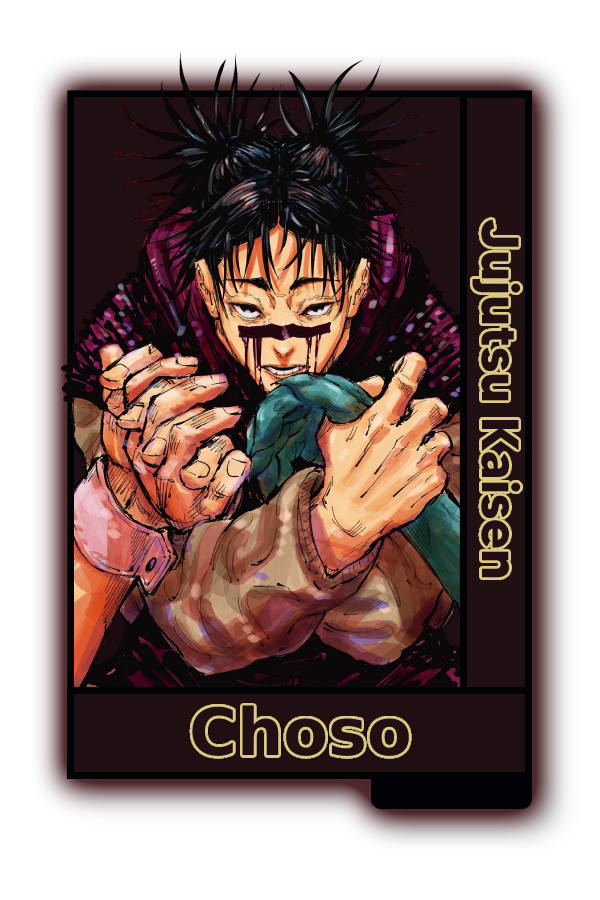
<style>
.page{position:relative;width:600px;height:900px;background:#ffffff}
.page>*{position:absolute;margin:0}
.t1{font:52px "MADETOMMY-Bold";color:#1e1214}
.t2{font:65.2px "MADETOMMY-Bold";color:#1e1214}
</style>
<div class="page">
<p class="t1" style="left:472px;top:219px;width:49px;height:359px;rotate:90deg">Jujutsu Kaisen</p>
<p class="t2" style="left:192px;top:705px;width:217px;height:51px">Choso</p>
</div>
